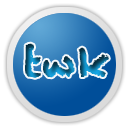
<style>
.page{position:relative;width:128px;height:128px;background:#ffffff}
.page>*{position:absolute;margin:0}
.t1{font:40px "Chalkduster";font-weight:bold}
</style>
<div class="page">
<p class="t1" style="left:25px;top:43px;width:84px;height:35px">twk</p>
</div>
